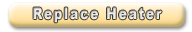
<style>
.page{position:relative;width:192px;height:32px}
.page>*{position:absolute;margin:0}
.t1{font:16px "Arial-Black";letter-spacing:0.1em;color:#e5e5e5;scale:0.8 1}
</style>
<div class="page">
<p class="t1" style="left:33px;top:7px;width:129px;height:16px">Replace Heater</p>
</div>
